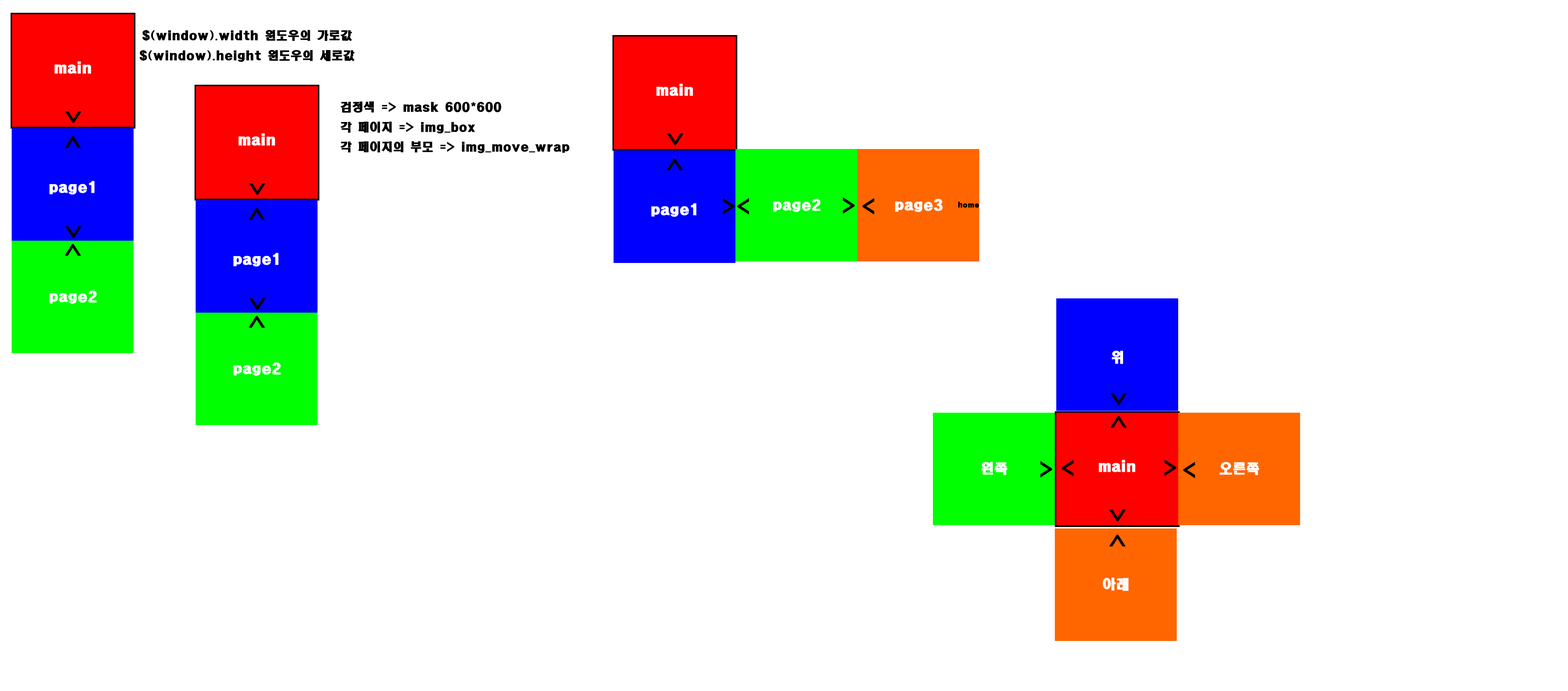
<style>
.page{position:relative;width:1568px;height:691px;background:#ffffff}
.page>*{position:absolute;margin:0}
.t1{font:11.3px "HeadlineR-HM";color:#000000;font-weight:bold}
.t2{font:13.3px "HeadlineR-HM";color:#ffffff;font-weight:bold}
.t3{font:18.6px "HeadlineR-HM";color:#000000;font-weight:bold}
.t4{font:6.6px "HeadlineR-HM";color:#000000;font-weight:bold}
</style>
<div class="page">
<p class="t1" style="left:139px;top:30px;width:215px;height:32px;text-align:center">$(window).width 윈도우의 가로값<br>$(window).height 윈도우의 세로값</p>
<p class="t2" style="left:54px;top:61px;width:37px;height:13px">main</p>
<p class="t2" style="left:656px;top:84px;width:37px;height:12px">main</p>
<p class="t1" style="left:340px;top:101px;width:229px;height:52px">검정색 =&gt; mask 600*600<br>각 페이지 =&gt; img_box<br>각 페이지의 부모 =&gt; img_move_wrap</p>
<p class="t3" style="left:65px;top:111px;width:16px;height:12px;rotate:90deg">&gt;</p>
<p class="t3" style="left:65px;top:136px;width:16px;height:12px;rotate:-90deg">&gt;</p>
<p class="t2" style="left:238px;top:133px;width:37px;height:13px">main</p>
<p class="t3" style="left:667px;top:133px;width:16px;height:12px;rotate:90deg">&gt;</p>
<p class="t3" style="left:666px;top:158px;width:17px;height:12px;rotate:-90deg">&gt;</p>
<p class="t2" style="left:49px;top:181px;width:46px;height:14px">page1</p>
<p class="t3" style="left:249px;top:183px;width:16px;height:12px;rotate:90deg">&gt;</p>
<p class="t3" style="left:843px;top:197px;width:12px;height:17px">&gt;</p>
<p class="t3" style="left:249px;top:208px;width:16px;height:12px;rotate:-90deg">&gt;</p>
<p class="t2" style="left:651px;top:203px;width:45px;height:14px">page1</p>
<p class="t3" style="left:723px;top:198px;width:12px;height:16px">&gt;</p>
<p class="t3" style="left:737px;top:198px;width:12px;height:16px;rotate:180deg">&gt;</p>
<p class="t2" style="left:773px;top:199px;width:47px;height:13px">page2</p>
<p class="t3" style="left:862px;top:198px;width:13px;height:16px;rotate:180deg">&gt;</p>
<p class="t2" style="left:895px;top:199px;width:48px;height:13px">page3</p>
<p class="t4" style="left:958px;top:201px;width:21px;height:7px">home</p>
<p class="t3" style="left:65px;top:226px;width:16px;height:12px;rotate:90deg">&gt;</p>
<p class="t3" style="left:65px;top:244px;width:16px;height:12px;rotate:-90deg">&gt;</p>
<p class="t2" style="left:233px;top:253px;width:45px;height:13px">page1</p>
<p class="t2" style="left:49px;top:290px;width:48px;height:14px">page2</p>
<p class="t3" style="left:249px;top:298px;width:16px;height:12px;rotate:90deg">&gt;</p>
<p class="t3" style="left:249px;top:316px;width:16px;height:12px;rotate:-90deg">&gt;</p>
<p class="t2" style="left:1112px;top:350px;width:11px;height:14px">위</p>
<p class="t2" style="left:233px;top:362px;width:48px;height:14px">page2</p>
<p class="t3" style="left:1111px;top:393px;width:16px;height:12px;rotate:90deg">&gt;</p>
<p class="t3" style="left:1110px;top:416px;width:17px;height:12px;rotate:-90deg">&gt;</p>
<p class="t2" style="left:981px;top:461px;width:26px;height:14px">왼쪽</p>
<p class="t3" style="left:1040px;top:461px;width:12px;height:16px">&gt;</p>
<p class="t3" style="left:1062px;top:460px;width:12px;height:16px;rotate:180deg">&gt;</p>
<p class="t2" style="left:1099px;top:460px;width:36px;height:12px">main</p>
<p class="t3" style="left:1164px;top:460px;width:12px;height:16px">&gt;</p>
<p class="t3" style="left:1183px;top:462px;width:12px;height:16px;rotate:180deg">&gt;</p>
<p class="t2" style="left:1219px;top:462px;width:40px;height:13px">오른쪽</p>
<p class="t3" style="left:1110px;top:509px;width:16px;height:12px;rotate:90deg">&gt;</p>
<p class="t3" style="left:1109px;top:534px;width:17px;height:12px;rotate:-90deg">&gt;</p>
<p class="t2" style="left:1103px;top:577px;width:26px;height:14px">아래</p>
</div>
